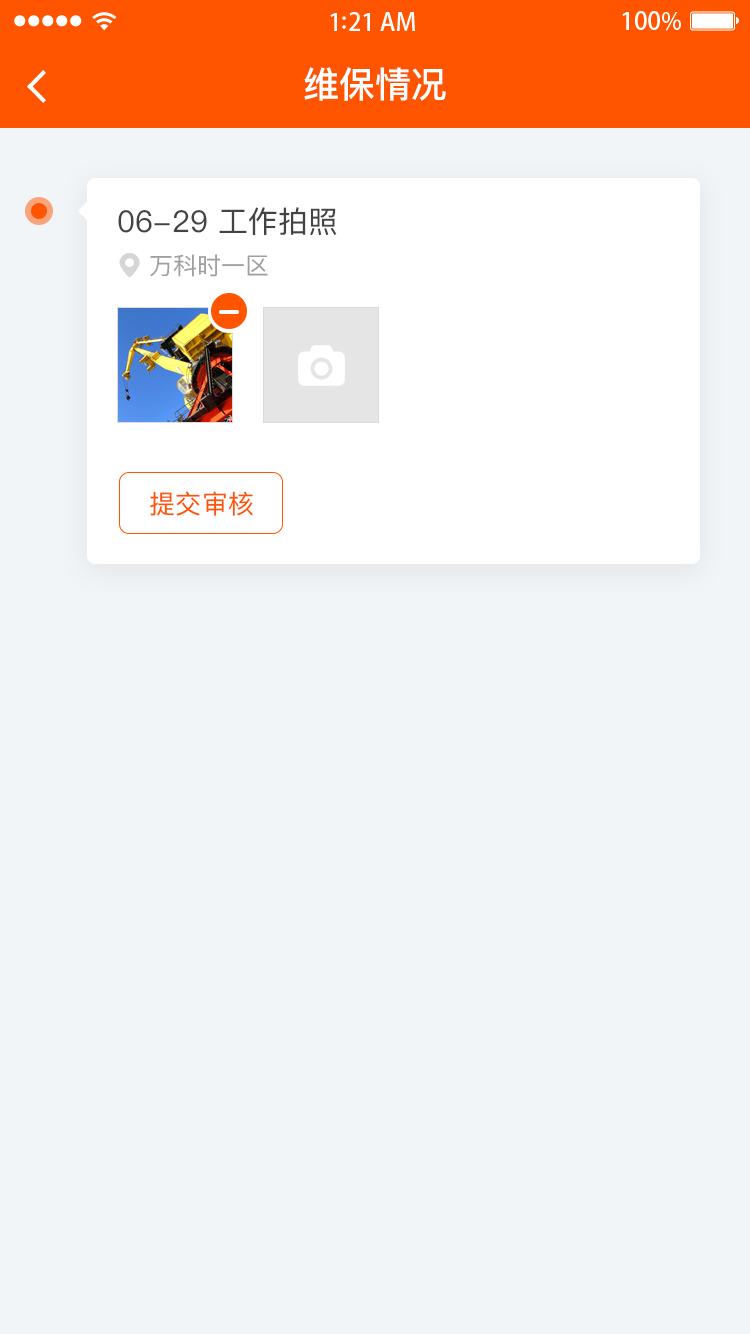
<style>
.page{position:relative;width:750px;height:1334px;background:#f2f5f7}
.page>*{position:absolute;margin:0}
.t1{font:36px "PingFangSC-Medium";color:#ffffff}
.t2{font:30px "PingFangSC-Regular";color:#434343}
.t3{font:24px "PingFangSC-Regular";color:#a0a0a0}
.t4{font:26px "PingFangSC-Regular";letter-spacing:0.02em;color:#ff5400}
</style>
<div class="page">
<p class="t1" style="left:304px;top:67px;width:142px;height:34px">维保情况</p>
<p class="t2" style="left:118px;top:207px;width:219px;height:29px">06-29 工作拍照</p>
<p class="t3" style="left:150px;top:254px;width:118px;height:23px">万科时一区</p>
<p class="t4" style="left:150px;top:491px;width:103px;height:25px">提交审核</p>
</div>
